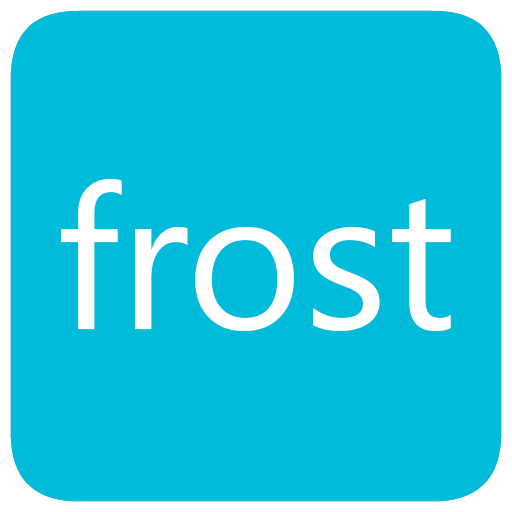
<style>
.page{position:relative;width:512px;height:512px;background:#00bcda}
.page>*{position:absolute;margin:0}
.t1{font:200px "SegoeUI";color:#ffffff}
</style>
<div class="page">
<p class="t1" style="left:61px;top:179px;width:390px;height:152px">frost</p>
</div>
